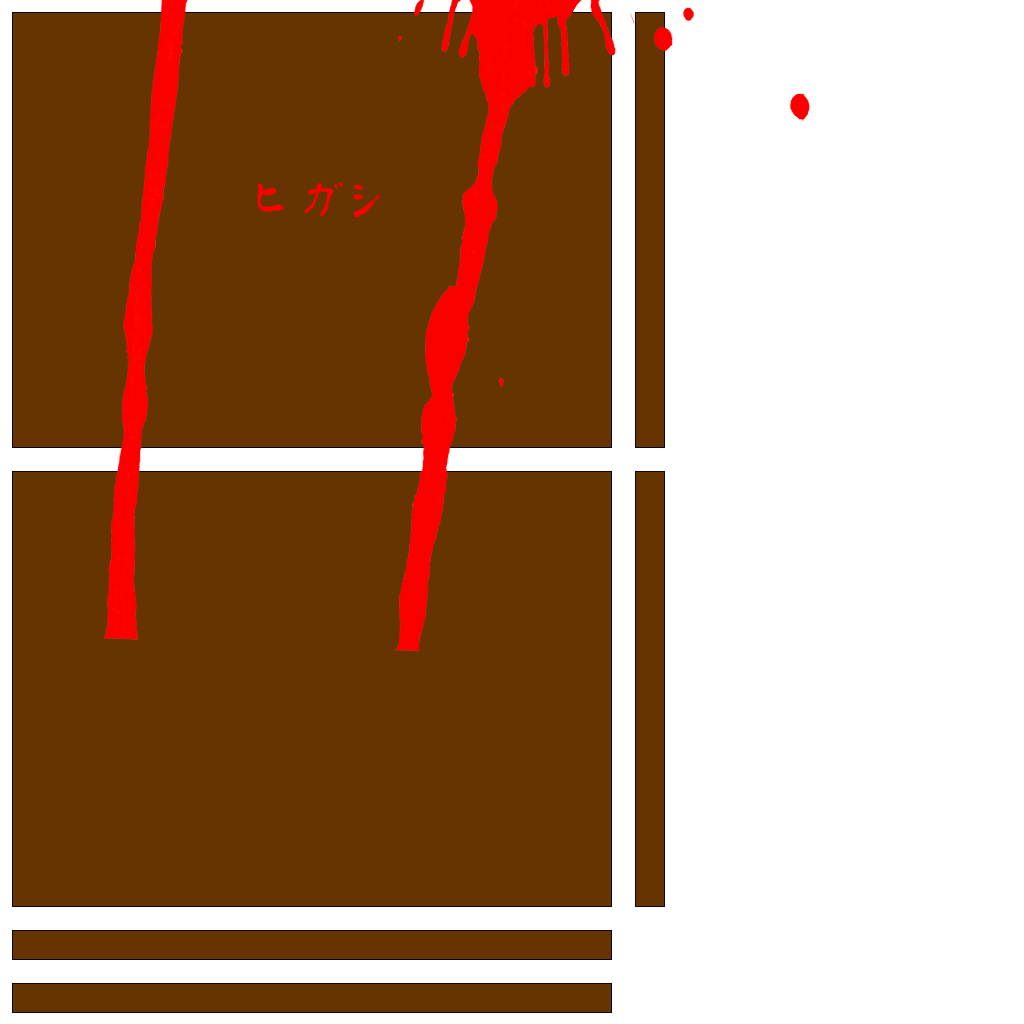
<style>
.page{position:relative;width:1024px;height:1024px;background:#653400}
.page>*{position:absolute;margin:0}
.t1{font:48px "aoyagireisyosimo2";color:#ff0000}
</style>
<div class="page">
<p class="t1" style="left:257px;top:182px;width:125px;height:36px">ヒガシ</p>
</div>
